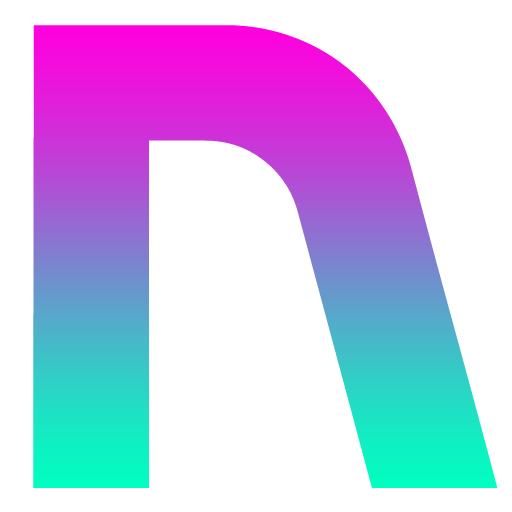
<style>
.page{position:relative;width:512px;height:512px;background:#ffffff}
.page>*{position:absolute;margin:0}
.t1{font:662px "STARBLASTERdemo"}
</style>
<div class="page">
<p class="t1" style="left:33px;top:25px;width:465px;height:463px">n</p>
</div>
